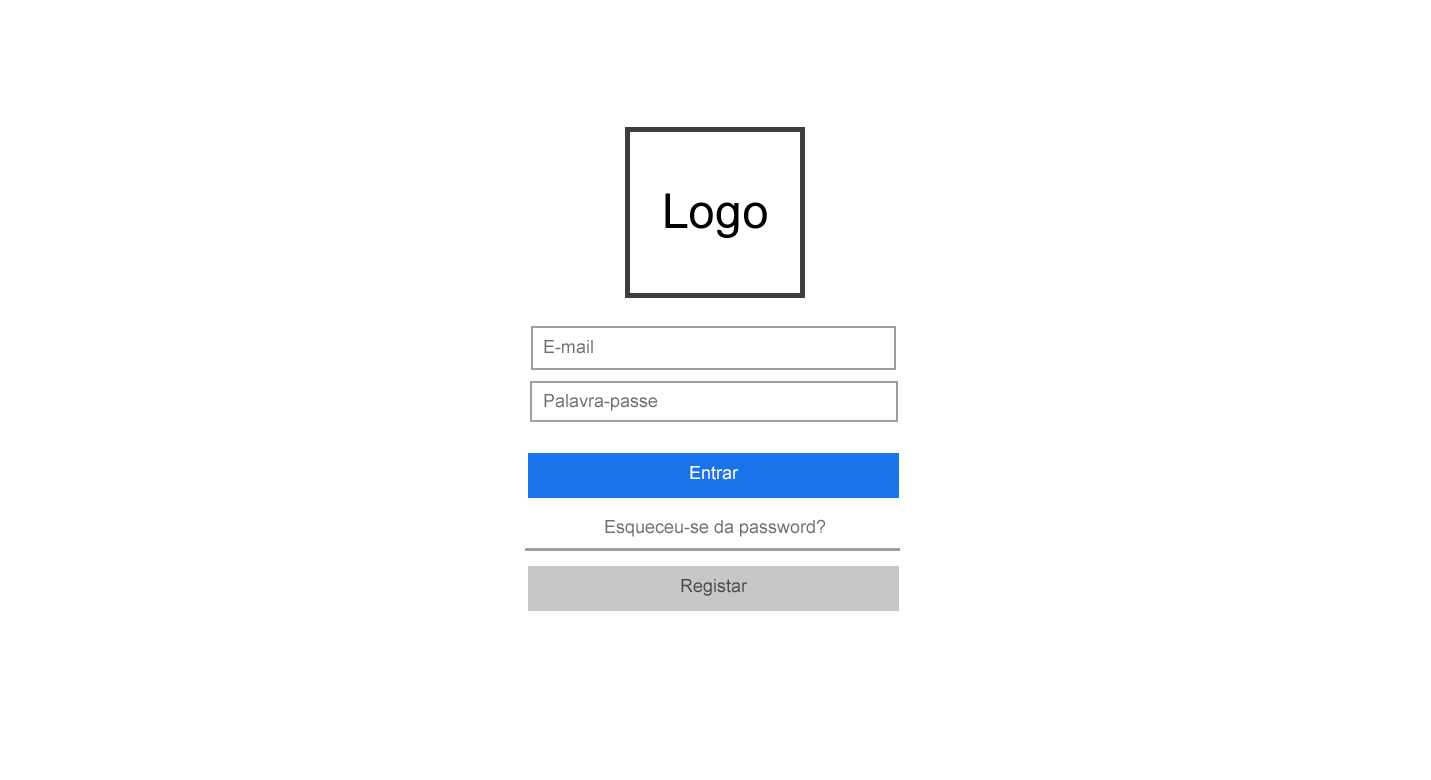
<style>
.page{position:relative;width:1431px;height:780px;background:#ffffff}
.page>*{position:absolute;margin:0}
.t1{font:18px "ArialMT";color:#6e6e6e}
.t2{font:18px "ArialMT";color:#ffffff}
.t3{font:18px "ArialMT";color:#484848}
</style>
<div class="page">
<p class="t1" style="left:544px;top:340px;width:49px;height:14px">E-mail</p>
<p class="t1" style="left:544px;top:394px;width:114px;height:17px">Palavra-passe</p>
<p class="t2" style="left:690px;top:466px;width:49px;height:14px">Entrar</p>
<p class="t1" style="left:605px;top:519px;width:221px;height:18px">Esqueceu-se da password?</p>
<p class="t3" style="left:681px;top:579px;width:67px;height:17px">Registar</p>
</div>
